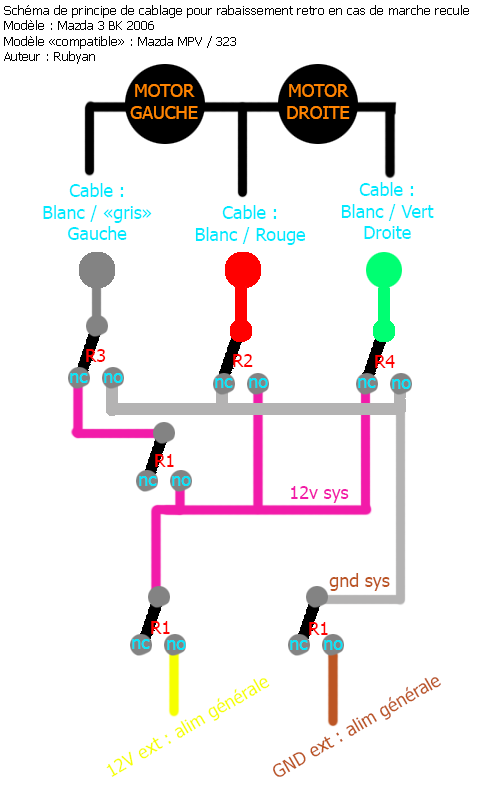
<style>
.page{position:relative;width:500px;height:800px;background:#ffffff}
.page>*{position:absolute;margin:0}
.t1{font:13px "Tahoma";color:#000000}
.t2{font:18px "Tahoma";color:#ff8400}
.t3{font:18px "Tahoma";color:#00eaff}
.t4{font:18px "Tahoma";color:#ff0000}
.t5{font:18px "Tahoma";color:#f21ba9}
.t6{font:18px "Tahoma";color:#bc5624}
.t7{font:18px "Tahoma";color:#f6ff05}
</style>
<div class="page">
<p class="t1" style="left:4px;top:5px;width:465px;height:59px">Schéma de principe de cablage pour rabaissement retro en cas de marche recule<br>Modèle : Mazda 3 BK 2006<br>Modèle «compatible» : Mazda MPV / 323<br>Auteur : Rubyan</p>
<p class="t2" style="left:130px;top:84px;width:68px;height:35px;text-align:center">MOTOR<br>GAUCHE</p>
<p class="t2" style="left:287px;top:84px;width:63px;height:35px;text-align:center">MOTOR<br>DROITE</p>
<p class="t3" style="left:43px;top:183px;width:109px;height:57px;text-align:center">Cable :<br>Blanc / «gris»<br>Gauche</p>
<p class="t3" style="left:341px;top:182px;width:93px;height:57px;text-align:center">Cable :<br>Blanc / Vert<br>Droite</p>
<p class="t3" style="left:195px;top:205px;width:111px;height:40px;text-align:center">Cable :<br>Blanc / Rouge</p>
<p class="t4" style="left:86px;top:349px;width:20px;height:13px">R3</p>
<p class="t4" style="left:233px;top:354px;width:20px;height:13px">R2</p>
<p class="t4" style="left:375px;top:355px;width:20px;height:13px">R4</p>
<p class="t3" style="left:70px;top:373px;width:18px;height:10px">nc</p>
<p class="t3" style="left:104px;top:373px;width:19px;height:10px">no</p>
<p class="t3" style="left:215px;top:378px;width:18px;height:10px">nc</p>
<p class="t3" style="left:249px;top:378px;width:19px;height:10px">no</p>
<p class="t3" style="left:358px;top:378px;width:18px;height:10px">nc</p>
<p class="t3" style="left:392px;top:379px;width:19px;height:10px">no</p>
<p class="t4" style="left:155px;top:454px;width:19px;height:13px">R1</p>
<p class="t3" style="left:139px;top:476px;width:18px;height:10px">nc</p>
<p class="t3" style="left:172px;top:476px;width:19px;height:10px">no</p>
<p class="t5" style="left:291px;top:486px;width:58px;height:17px">12v sys</p>
<p class="t6" style="left:329px;top:573px;width:61px;height:18px">gnd sys</p>
<p class="t4" style="left:151px;top:621px;width:19px;height:13px">R1</p>
<p class="t4" style="left:309px;top:622px;width:19px;height:13px">R1</p>
<p class="t3" style="left:132px;top:639px;width:18px;height:10px">nc</p>
<p class="t3" style="left:167px;top:640px;width:19px;height:10px">no</p>
<p class="t3" style="left:290px;top:640px;width:18px;height:10px">nc</p>
<p class="t3" style="left:324px;top:640px;width:19px;height:10px">no</p>
<p class="t7" style="left:106px;top:678px;width:164px;height:99px;rotate:-30deg">12V ext : alim générale</p>
<p class="t6" style="left:273px;top:677px;width:168px;height:100px;rotate:-30deg">GND ext : alim générale</p>
</div>
